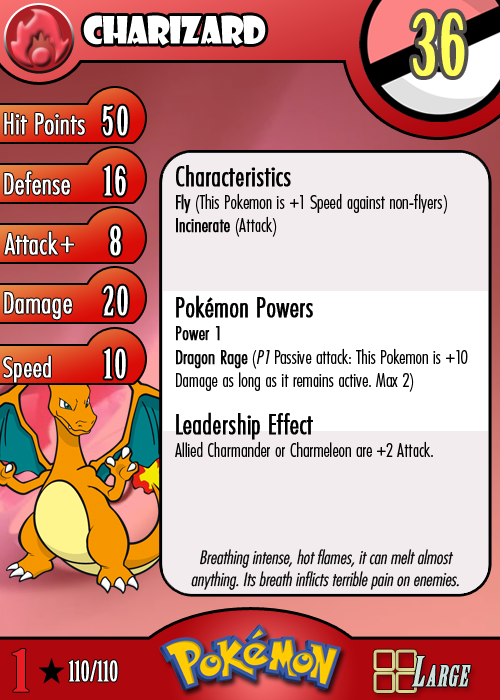
<style>
.page{position:relative;width:500px;height:700px;background:#f2ecee}
.page>*{position:absolute;margin:0}
.t1{font:36.7px "ShowcardGothic-Reg";letter-spacing:-0.025em;color:#ffffff;scale:0.91 1}
.t2{font:83.3px "BirchStd";letter-spacing:0.025em;color:#fffd59;font-weight:bold}
.t3{font:27.8px "Futura-CondensedLight";color:#ffffff;font-weight:bold}
.t4{font:38.9px "BirchStd";letter-spacing:0.035em;color:#ffffff;font-weight:bold}
.t5{font:19.4px "FuturaCondensedBQ-Light";color:#010101}
.t6{font:27.8px "FuturaCondensedBQ-Light";color:#010101;font-weight:bold}
.t7{font:19.4px "FuturaCondensedBQ-Light";color:#010101;font-weight:bold}
.t8{font:19.4px "FuturaCondensedBQ-Light";color:#010101;font-style:italic}
.t9{font:30.6px "Futura-CondensedLight";color:#ffffff;font-weight:bold}
.t10{font:27.8px "FuturaCondensedBQ-Light";color:#ffffff;font-weight:bold}
.t11{font:18.1px "Futura-CondensedLight";color:#010101;font-style:italic}
.t12{font:55.6px "BirchStd";color:#ed1c24;font-weight:bold;scale:1.5 1}
.t13{font:27.8px "BirchStd";color:#ffffff;font-weight:bold}
</style>
<div class="page">
<p class="t1" style="left:83px;top:15px;width:183px;height:31px">charizard</p>
<p class="t2" style="left:413px;top:12px;width:52px;height:64px">36</p>
<p class="t3" style="left:4px;top:113px;width:81px;height:22px">Hit Points</p>
<p class="t4" style="left:103px;top:105px;width:25px;height:31px">50</p>
<p class="t3" style="left:4px;top:171px;width:66px;height:24px">Defense</p>
<p class="t4" style="left:104px;top:165px;width:22px;height:31px">16</p>
<p class="t5" style="left:175px;top:165px;width:293px;height:292px"><span class="t6">Characteristics<br></span><span class="t7">Fly</span> (This Pokemon is +1 Speed against non-flyers)<br><span class="t7">Incinerate</span> (Attack)<br><br><span class="t6">Pokémon Powers<br></span><span class="t7">Power 1<br>Dragon Rage</span> (<span class="t8">P1</span> Passive attack: This Pokemon is +10 Damage as long as it remains active. Max 2)<br><span class="t6">Leadership Effect<br></span>Allied Charmander or Charmeleon are +2 Attack.</p>
<p class="t3" style="left:4px;top:231px;width:54px;height:24px">Attack</p>
<p class="t4" style="left:110px;top:225px;width:11px;height:31px">8</p>
<p class="t9" style="left:60px;top:236px;width:14px;height:17px">+</p>
<p class="t3" style="left:4px;top:292px;width:68px;height:28px">Damage</p>
<p class="t4" style="left:103px;top:285px;width:25px;height:31px">20</p>
<p class="t4" style="left:104px;top:348px;width:22px;height:31px">10</p>
<p class="t10" style="left:3px;top:355px;width:48px;height:28px">Speed</p>
<p class="t11" style="left:191px;top:549px;width:268px;height:41px;text-align:center">Breathing intense, hot flames, it can melt almost anything. Its breath inflicts terrible pain on enemies.</p>
<p class="t12" style="left:12px;top:649px;width:17px;height:43px">1</p>
<p class="t13" style="left:68px;top:660px;width:50px;height:22px">110/110</p>
</div>
